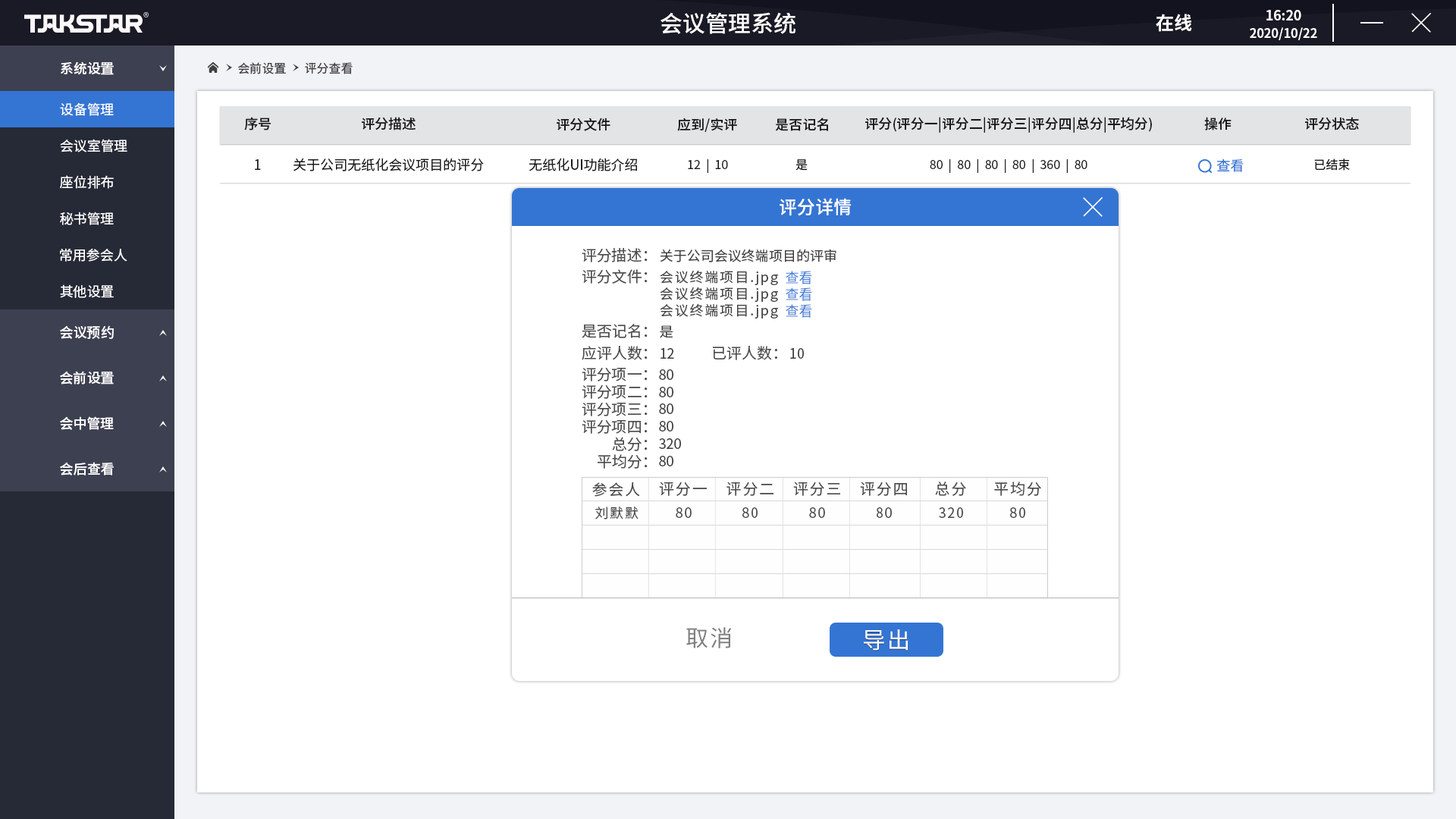
<style>
.page{position:relative;width:1456px;height:819px;background:#ffffff}
.page>*{position:absolute;margin:0}
.t1{font:22.7px "SourceHanSansCN-Medium";color:#ffffff}
.t2{font:18.2px "SourceHanSansCN-Bold";color:#ffffff}
.t3{font:12.6px/17.2px "SourceHanSansCN-Bold";letter-spacing:-0.01em;color:#fefefe}
.t4{font:13.8px/17.2px "SourceHanSansCN-Bold";letter-spacing:-0.01em;color:#fefefe}
.t5{font:13.6px "SourceHanSansCN-Medium";color:#ffffff}
.t6{font:12.1px "SourceHanSansCN-Regular";color:#404040}
.t7{font:13.6px "SourceHanSansCN-Regular";color:#ffffff}
.t8{font:13.6px "SourceHanSansCN-Medium";color:#1a1a1a}
.t9{font:13.6px "SourceHanSansCN-Regular";color:#1a1a1a}
.t10{font:12.1px "SourceHanSansCN-Regular";color:#1a1a1a}
.t11{font:13.6px "SourceHanSansCN-Regular";color:#3475d3}
.t12{font:18.2px "SourceHanSansCN-Medium";color:#ffffff}
.t13{font:15.1px "SourceHanSansCN-Regular";color:#4d4d4d}
.t14{font:13.6px "SourceHanSansCN-Regular";color:#404040}
.t15{font:13.7px "SourceHanSansCN-Regular";letter-spacing:0.1em;color:#444444}
.t16{font:13.7px "SourceHanSansCN-Regular";color:#3475d3}
.t17{font:15.2px "SourceHanSansCN-Regular";letter-spacing:0.1em;color:#4c4c4c}
.t18{font:13.6px "SourceHanSansCN-Regular";letter-spacing:0.1em;color:#4c4c4c}
.t19{font:22.7px "SourceHanSansCN-Regular";letter-spacing:0.075em;color:#808080}
.t20{font:22.7px "SourceHanSansCN-Regular";letter-spacing:0.075em;color:#ffffff}
</style>
<div class="page">
<p class="t1" style="left:660px;top:12px;width:135px;height:22px">会议管理系统</p>
<p class="t2" style="left:1156px;top:14px;width:36px;height:18px">在线</p>
<p class="t3" style="left:1250px;top:10px;width:67px;height:30px;text-align:center"><span class="t4">16:20<br></span>2020/10/22</p>
<p class="t5" style="left:61px;top:61px;width:53px;height:14px">系统设置</p>
<p class="t6" style="left:238px;top:62px;width:48px;height:12px">会前设置</p>
<p class="t6" style="left:305px;top:62px;width:48px;height:12px">评分查看</p>
<p class="t7" style="left:60px;top:102px;width:54px;height:14px">设备管理</p>
<p class="t8" style="left:244px;top:117px;width:27px;height:13px">序号</p>
<p class="t8" style="left:362px;top:117px;width:54px;height:13px">评分描述</p>
<p class="t8" style="left:557px;top:118px;width:53px;height:13px">评分文件</p>
<p class="t8" style="left:677px;top:118px;width:60px;height:14px">应到/实评</p>
<p class="t8" style="left:775px;top:118px;width:53px;height:13px">是否记名</p>
<p class="t8" style="left:865px;top:117px;width:287px;height:16px">评分(评分一|评分二|评分三|评分四|总分|平均分)</p>
<p class="t8" style="left:1204px;top:117px;width:28px;height:13px">操作</p>
<p class="t8" style="left:1305px;top:117px;width:54px;height:13px">评分状态</p>
<p class="t7" style="left:60px;top:139px;width:67px;height:13px">会议室管理</p>
<p class="t9" style="left:255px;top:159px;width:6px;height:11px">1</p>
<p class="t9" style="left:293px;top:158px;width:191px;height:13px">关于公司无纸化会议项目的评分</p>
<p class="t9" style="left:529px;top:158px;width:108px;height:13px">无纸化UI功能介绍</p>
<p class="t10" style="left:688px;top:158px;width:40px;height:15px">12  |  10</p>
<p class="t10" style="left:795px;top:159px;width:13px;height:12px">是</p>
<p class="t10" style="left:930px;top:158px;width:157px;height:15px">80  |  80  |  80  |  80  |  360  |  80</p>
<p class="t11" style="left:1216px;top:158px;width:28px;height:14px">查看</p>
<p class="t10" style="left:1314px;top:158px;width:36px;height:13px">已结束</p>
<p class="t7" style="left:60px;top:175px;width:54px;height:14px">座位排布</p>
<p class="t12" style="left:780px;top:198px;width:72px;height:18px">评分详情</p>
<p class="t7" style="left:60px;top:212px;width:54px;height:13px">秘书管理</p>
<p class="t7" style="left:60px;top:248px;width:67px;height:14px">常用参会人</p>
<p class="t13" style="left:582px;top:248px;width:66px;height:14px">评分描述：</p>
<p class="t14" style="left:660px;top:249px;width:176px;height:13px">关于公司会议终端项目的评审</p>
<p class="t13" style="left:582px;top:269px;width:66px;height:15px">评分文件：</p>
<p class="t15" style="left:660px;top:270px;width:118px;height:15px">会议终端项目.jpg</p>
<p class="t16" style="left:786px;top:271px;width:26px;height:13px">查看</p>
<p class="t7" style="left:60px;top:284px;width:54px;height:14px">其他设置</p>
<p class="t15" style="left:660px;top:287px;width:118px;height:15px">会议终端项目.jpg</p>
<p class="t16" style="left:786px;top:287px;width:26px;height:14px">查看</p>
<p class="t15" style="left:660px;top:303px;width:118px;height:15px">会议终端项目.jpg</p>
<p class="t16" style="left:786px;top:304px;width:26px;height:14px">查看</p>
<p class="t5" style="left:60px;top:325px;width:54px;height:14px">会议预约</p>
<p class="t13" style="left:582px;top:324px;width:66px;height:14px">是否记名：</p>
<p class="t14" style="left:660px;top:325px;width:13px;height:13px">是</p>
<p class="t13" style="left:582px;top:346px;width:66px;height:14px">应评人数：</p>
<p class="t14" style="left:660px;top:348px;width:14px;height:11px">12</p>
<p class="t13" style="left:713px;top:346px;width:64px;height:14px">已评人数：</p>
<p class="t14" style="left:790px;top:348px;width:14px;height:11px">10</p>
<p class="t5" style="left:60px;top:371px;width:54px;height:13px">会前设置</p>
<p class="t13" style="left:582px;top:368px;width:66px;height:13px">评分项一：</p>
<p class="t14" style="left:659px;top:369px;width:14px;height:11px">80</p>
<p class="t13" style="left:582px;top:385px;width:66px;height:14px">评分项二：</p>
<p class="t14" style="left:659px;top:387px;width:14px;height:10px">80</p>
<p class="t13" style="left:582px;top:403px;width:66px;height:13px">评分项三：</p>
<p class="t14" style="left:659px;top:403px;width:14px;height:11px">80</p>
<p class="t5" style="left:60px;top:416px;width:54px;height:14px">会中管理</p>
<p class="t13" style="left:582px;top:420px;width:66px;height:14px">评分项四：</p>
<p class="t14" style="left:659px;top:421px;width:14px;height:10px">80</p>
<p class="t13" style="left:612px;top:437px;width:36px;height:14px">总分：</p>
<p class="t14" style="left:659px;top:438px;width:22px;height:11px">320</p>
<p class="t5" style="left:60px;top:462px;width:54px;height:13px">会后查看</p>
<p class="t13" style="left:597px;top:454px;width:51px;height:15px">平均分：</p>
<p class="t14" style="left:659px;top:456px;width:14px;height:10px">80</p>
<p class="t17" style="left:592px;top:482px;width:48px;height:15px">参会人</p>
<p class="t17" style="left:659px;top:482px;width:48px;height:14px">评分一</p>
<p class="t17" style="left:726px;top:482px;width:47px;height:14px">评分二</p>
<p class="t17" style="left:793px;top:482px;width:47px;height:14px">评分三</p>
<p class="t17" style="left:860px;top:482px;width:47px;height:14px">评分四</p>
<p class="t17" style="left:935px;top:482px;width:31px;height:14px">总分</p>
<p class="t17" style="left:994px;top:482px;width:47px;height:14px">平均分</p>
<p class="t18" style="left:595px;top:506px;width:44px;height:13px">刘默默</p>
<p class="t18" style="left:676px;top:507px;width:16px;height:11px">80</p>
<p class="t18" style="left:742px;top:507px;width:16px;height:11px">80</p>
<p class="t18" style="left:809px;top:507px;width:16px;height:11px">80</p>
<p class="t18" style="left:877px;top:507px;width:15px;height:11px">80</p>
<p class="t18" style="left:939px;top:507px;width:24px;height:11px">320</p>
<p class="t18" style="left:1010px;top:507px;width:15px;height:11px">80</p>
<p class="t19" style="left:686px;top:627px;width:46px;height:21px">取消</p>
<p class="t20" style="left:864px;top:629px;width:44px;height:22px">导出</p>
</div>
